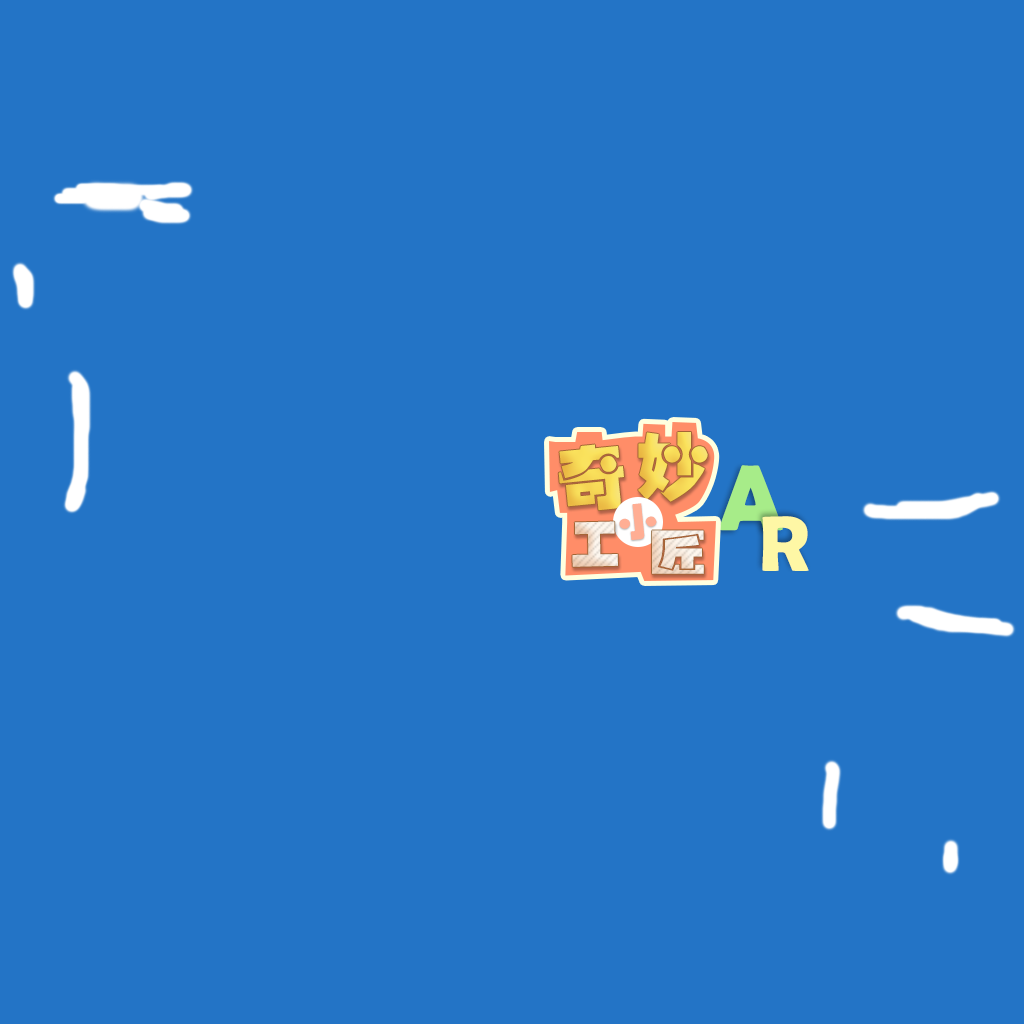
<style>
.page{position:relative;width:1024px;height:1024px;background:#2374c6}
.page>*{position:absolute;margin:0}
.t1{font:73.6px "HYb8gf";color:#f7da57}
.t2{font:71.6px "HYb8gf";color:#f7d957}
.t3{font:92.8px "BerlinSansFBDemi-Bold";letter-spacing:-0.05em;color:#a7ec89}
.t4{font:39.4px "HYb8gf";color:#ffae94;scale:1.07 1}
.t5{font:51px "HYb8gf"}
.t6{font:78.9px "BerlinSansFBDemi-Bold";letter-spacing:-0.05em;color:#fef7a5}
.t7{font:49px "HYb8gf";scale:1.24 1}
</style>
<div class="page">
<p class="t1" style="left:638px;top:432px;width:70px;height:70px">妙</p>
<p class="t2" style="left:558px;top:444px;width:66px;height:67px;rotate:-6deg">奇</p>
<p class="t3" style="left:719px;top:465px;width:64px;height:66px">A</p>
<p class="t4" style="left:619px;top:503px;width:38px;height:37px;rotate:-6deg">小</p>
<p class="t5" style="left:572px;top:521px;width:46px;height:46px;rotate:-1deg">工</p>
<p class="t6" style="left:762px;top:516px;width:47px;height:55px">R</p>
<p class="t7" style="left:652px;top:530px;width:52px;height:44px">匠</p>
</div>
